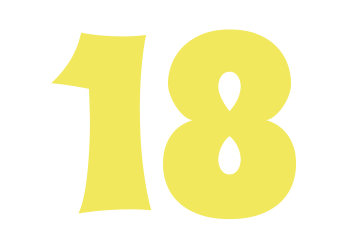
<style>
.page{position:relative;width:354px;height:236px;background:#ffffff}
.page>*{position:absolute;margin:0}
.t1{font:250px "SpicyRice-Regular";color:#f2e85e}
</style>
<div class="page">
<p class="t1" style="left:51px;top:29px;width:246px;height:191px">18</p>
</div>
